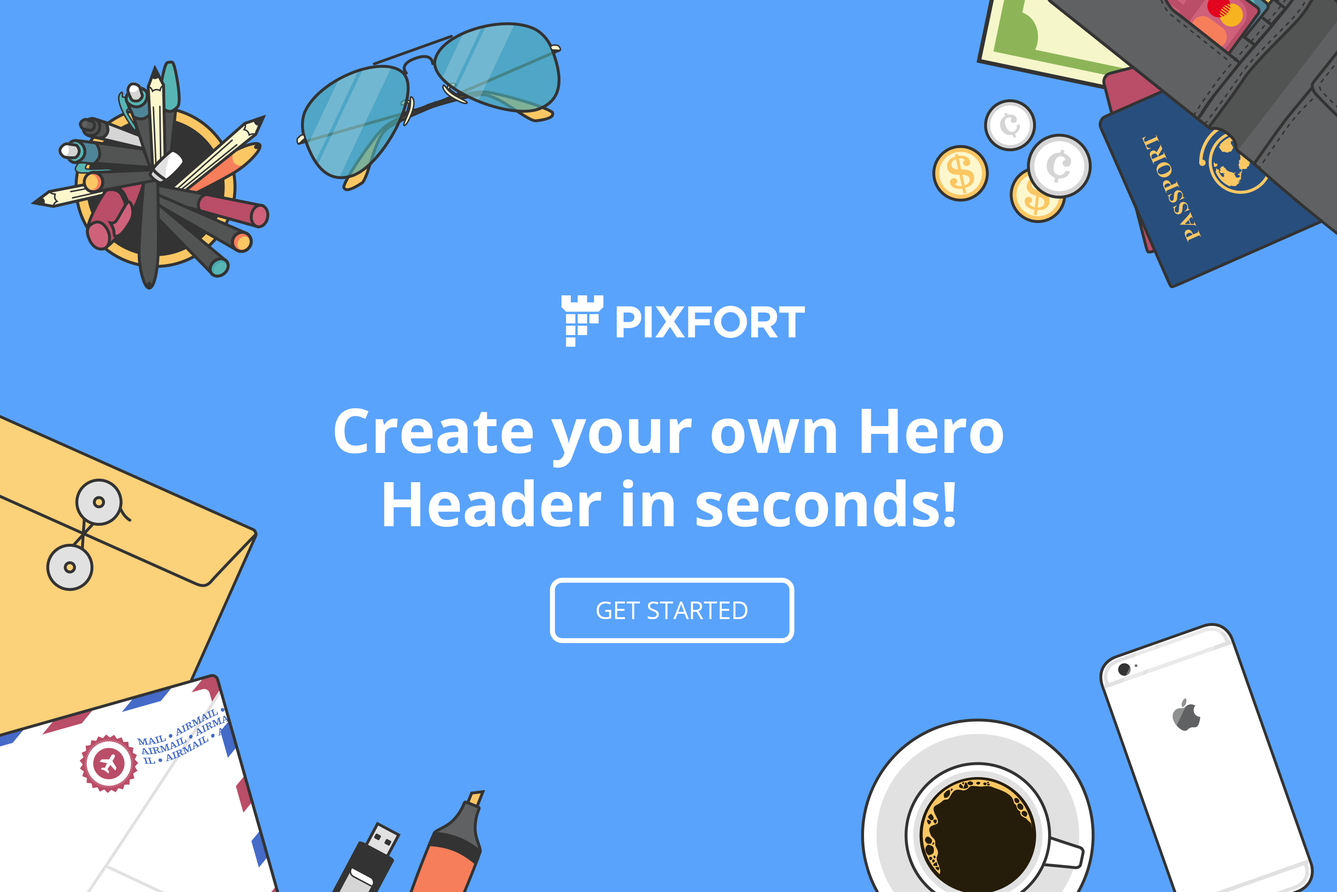
<style>
.page{position:relative;width:1337px;height:892px;background:#59a3fc}
.page>*{position:absolute;margin:0}
.t1{font:61.5px/73.3px "OpenSans-Bold";color:#ffffff}
.t2{font:24.4px "OpenSans";color:#ffffff;text-transform:uppercase}
</style>
<div class="page">
<p class="t1" style="left:335px;top:408px;width:669px;height:119px;text-align:center">Create your own Hero<br>Header in seconds!</p>
<p class="t2" style="left:597px;top:601px;width:151px;height:18px">Get started</p>
</div>
